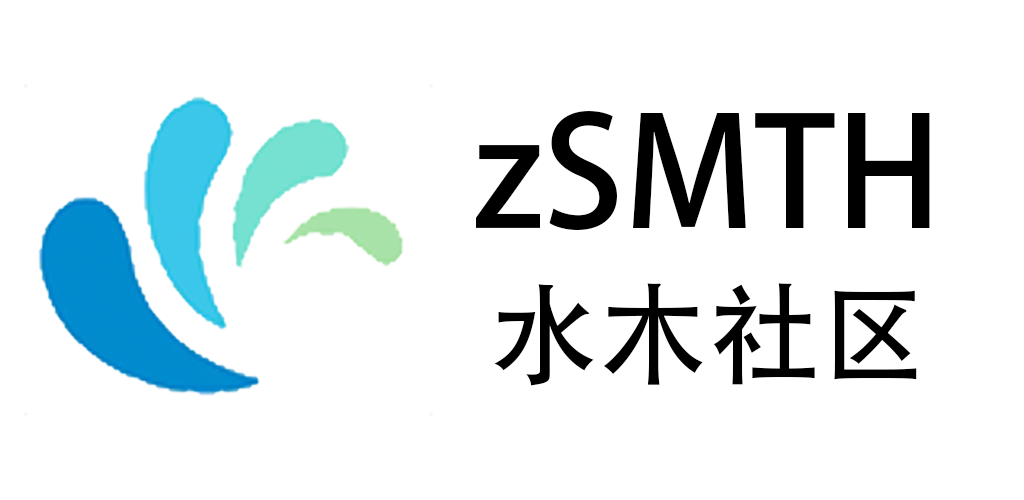
<style>
.page{position:relative;width:1024px;height:500px;background:#ffffff}
.page>*{position:absolute;margin:0}
.t1{font:150px "AdobeHeitiStd-Regular";color:#000000}
.t2{font:110px "AdobeHeitiStd-Regular";color:#000000}
</style>
<div class="page">
<p class="t1" style="left:476px;top:111px;width:454px;height:119px">zSMTH</p>
<p class="t2" style="left:494px;top:283px;width:423px;height:103px">水木社区</p>
</div>
